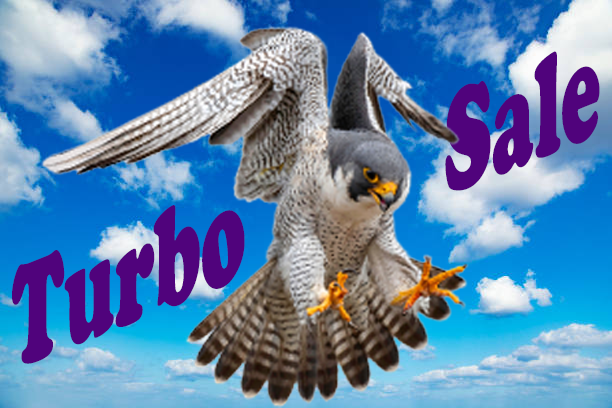
<style>
.page{position:relative;width:612px;height:408px}
.page>*{position:absolute;margin:0}
.t1{font:150px "CooperBlack";color:#50037c;scale:0.53 1}
</style>
<div class="page">
<p class="t1" style="left:12px;top:51px;width:588px;height:313px;rotate:-22deg">Turbo        Sale</p>
</div>
